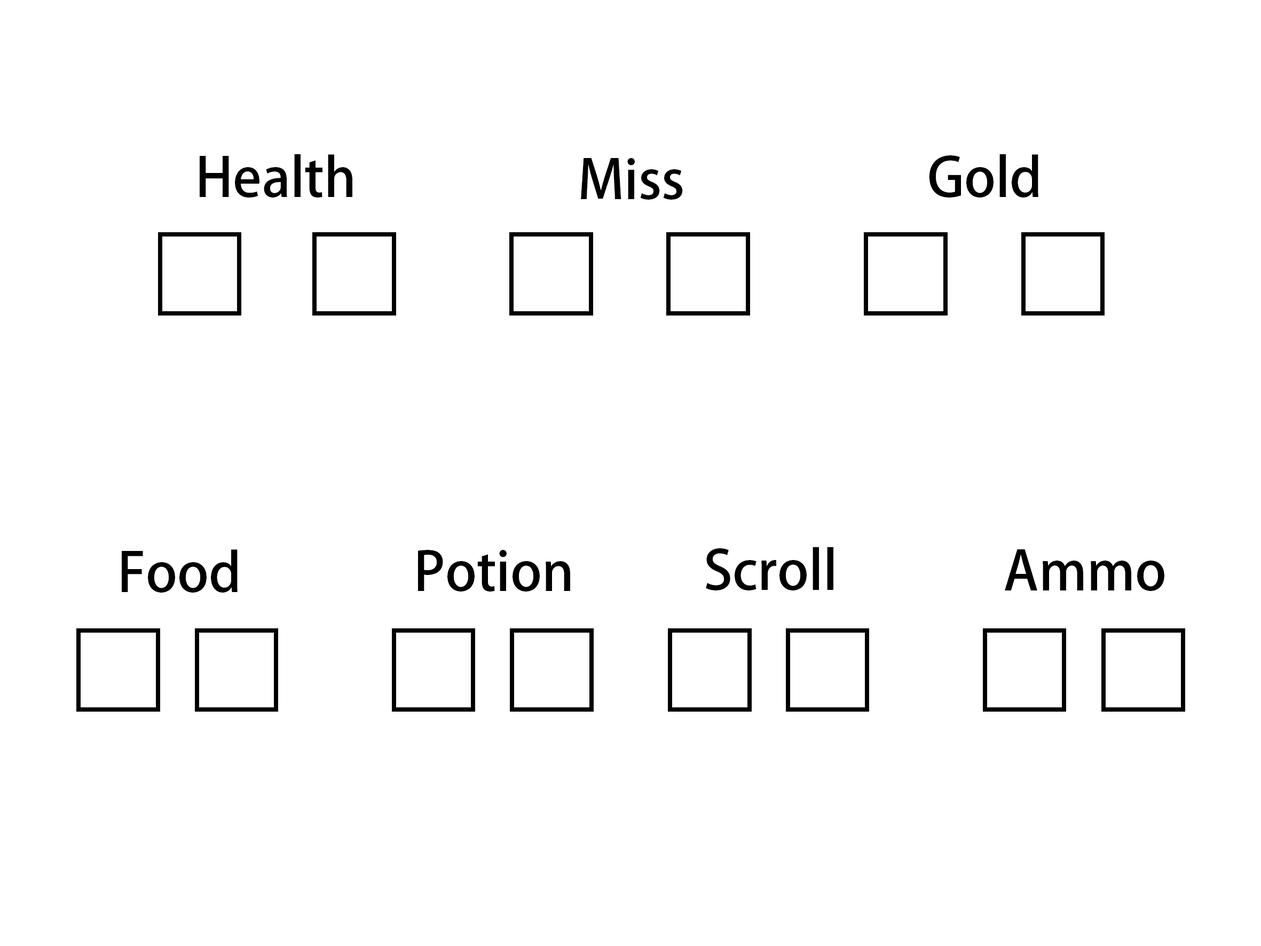
<style>
.page{position:relative;width:1261px;height:946px;background:#ffffff}
.page>*{position:absolute;margin:0}
.t1{font:53.4px "AdobeHeitiStd-Regular";color:#000000}
</style>
<div class="page">
<p class="t1" style="left:200px;top:154px;width:152px;height:43px">Health</p>
<p class="t1" style="left:581px;top:158px;width:102px;height:42px">Miss</p>
<p class="t1" style="left:929px;top:154px;width:109px;height:43px">Gold</p>
<p class="t1" style="left:122px;top:549px;width:116px;height:43px">Food</p>
<p class="t1" style="left:418px;top:550px;width:152px;height:41px">Potion</p>
<p class="t1" style="left:706px;top:547px;width:127px;height:43px">Scroll</p>
<p class="t1" style="left:1005px;top:549px;width:159px;height:42px">Ammo</p>
</div>
